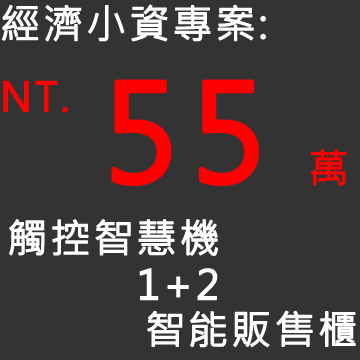
<style>
.page{position:relative;width:360px;height:360px;background:#333333}
.page>*{position:absolute;margin:0}
.t1{font:40px "MicrosoftJhengHeiRegular";letter-spacing:0.05em;color:#ffffff;font-weight:bold}
.t2{font:39.9px "MicrosoftJhengHeiRegular";letter-spacing:0.05em;color:#ff0000;font-weight:bold}
.t3{font:133.3px "MicrosoftJhengHeiRegular";letter-spacing:0.05em;color:#ff0000;font-weight:bold}
.t4{font:40px "MicrosoftJhengHeiRegular";letter-spacing:0.05em;color:#ff0000;font-weight:bold}
.t5{font:39.7px "MicrosoftJhengHeiRegular";letter-spacing:0.05em;color:#ffffff;font-weight:bold}
</style>
<div class="page">
<p class="t1" style="left:1px;top:4px;width:265px;height:38px">經濟小資專案:</p>
<p class="t2" style="left:3px;top:80px;width:65px;height:33px">NT.</p>
<p class="t3" style="left:111px;top:79px;width:148px;height:107px">55</p>
<p class="t4" style="left:310px;top:149px;width:37px;height:37px">萬</p>
<p class="t1" style="left:9px;top:219px;width:209px;height:37px">觸控智慧機</p>
<p class="t1" style="left:139px;top:268px;width:79px;height:33px">1+2</p>
<p class="t5" style="left:147px;top:310px;width:209px;height:38px">智能販售櫃</p>
</div>
